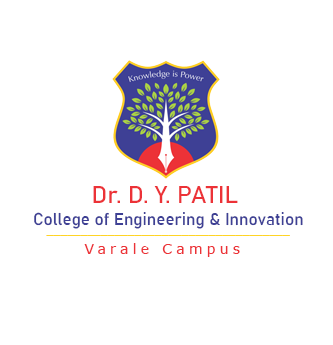
<style>
.page{position:relative;width:333px;height:345px;background:#ffffff}
.page>*{position:absolute;margin:0}
.t1{font:24px "Bahnschrift";color:#ec3237}
.t2{font:17px "Bahnschrift";color:#3e4095}
.t3{font:17px "AdobeNaskh-Medium";color:#ffd425}
.t4{font:14px "Verdana";letter-spacing:0.3em;color:#ec3237}
</style>
<div class="page">
<p class="t1" style="left:93px;top:186px;width:145px;height:17px">Dr. D. Y. PATIL</p>
<p class="t2" style="left:34px;top:212px;width:269px;height:17px">College of Engineering &amp; Innovation</p>
<p class="t3" style="left:46px;top:235px;width:244px;height:1px">____________________________________</p>
<p class="t4" style="left:84px;top:243px;width:156px;height:14px">Varale Campus</p>
</div>
